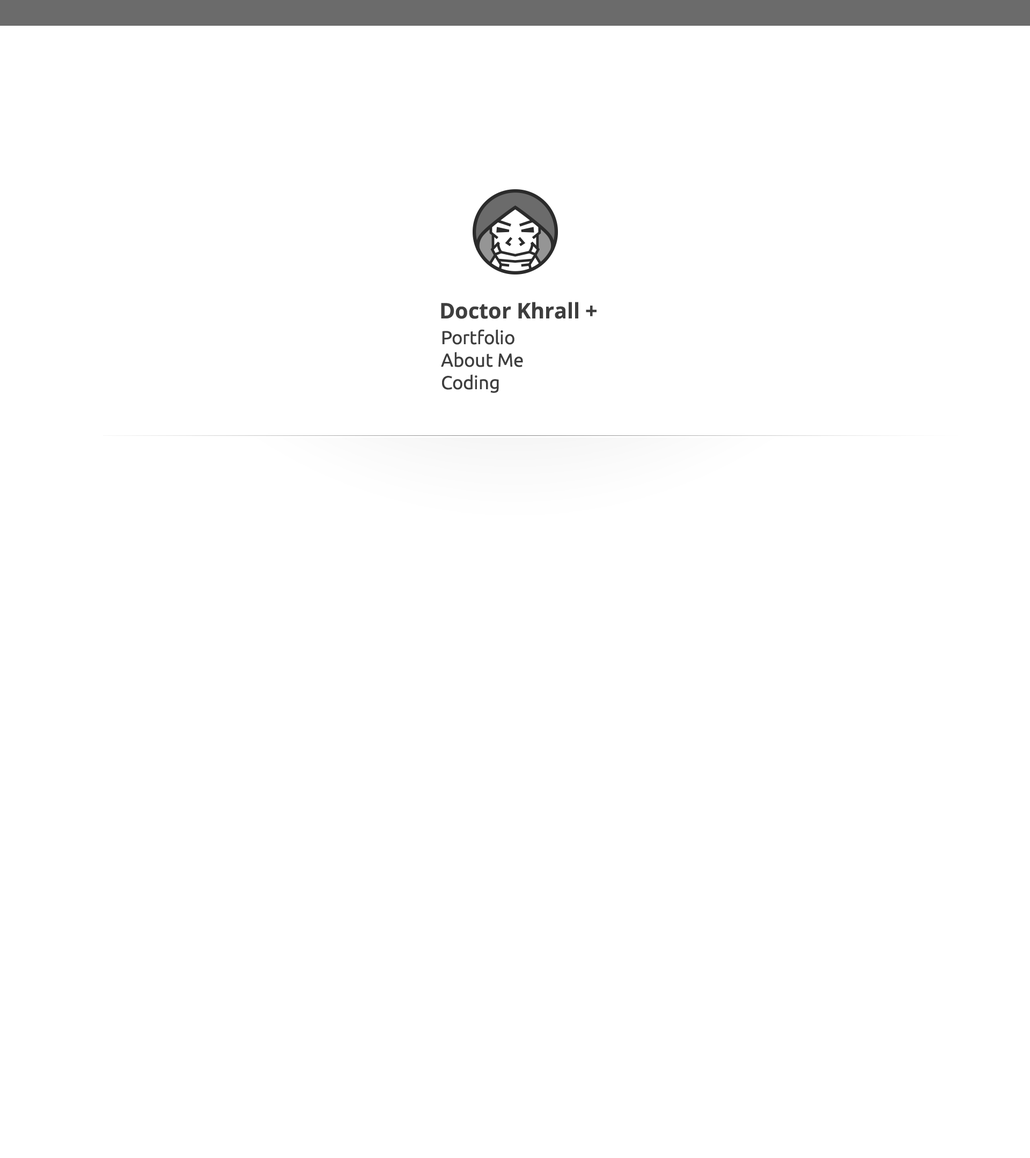
<style>
.page{position:relative;width:1030px;height:1158px;background:#ffffff}
.page>*{position:absolute;margin:0}
.t1{font:21.4px "OpenSans-Bold";color:#3e3e3e}
.t2{font:18.8px "Ubuntu";color:#3e3e3e}
</style>
<div class="page">
<p class="t1" style="left:441px;top:302px;width:155px;height:17px">Doctor Khrall +</p>
<p class="t2" style="left:441px;top:329px;width:82px;height:64px">Portfolio<br>About Me<br>Coding</p>
</div>
